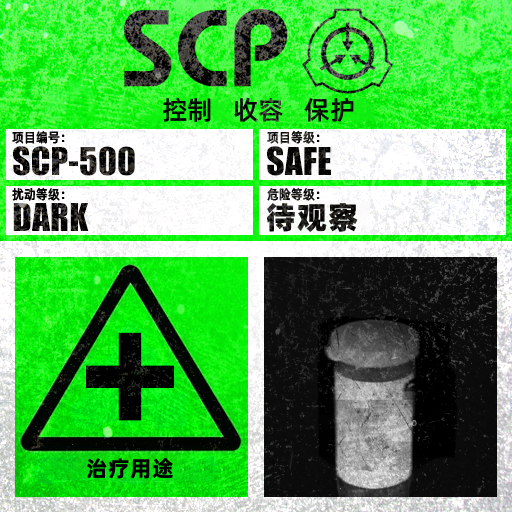
<style>
.page{position:relative;width:512px;height:512px}
.page>*{position:absolute;margin:0}
.t1{font:26px "AlibabaPuHuiTiM";color:#000000}
.t2{font:13.3px "AlibabaPuHuiTiM";letter-spacing:0.02em;color:#000000;scale:0.9 1}
.t3{font:13.3px "AlibabaPuHuiTiM";letter-spacing:0.02em;scale:0.9 1}
.t4{font:30.3px "AlibabaPuHuiTiH";letter-spacing:0.02em}
.t5{font:22px "AlibabaPuHuiTiB";letter-spacing:0.02em;color:#000000}
</style>
<div class="page">
<p class="t1" style="left:163px;top:97px;width:191px;height:26px">控制   收容   保护</p>
<p class="t2" style="left:12px;top:131px;width:53px;height:13px">项目编号：</p>
<p class="t3" style="left:267px;top:131px;width:53px;height:13px">项目等级：</p>
<p class="t2" style="left:12px;top:188px;width:53px;height:13px">扰动等级：</p>
<p class="t3" style="left:267px;top:188px;width:53px;height:13px">危险等级：</p>
<p class="t4" style="left:266px;top:203px;width:92px;height:29px">待观察</p>
<p class="t5" style="left:87px;top:458px;width:86px;height:21px">治疗用途</p>
</div>
